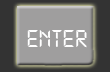
<style>
.page{position:relative;width:110px;height:72px;background:#9f9e9e}
.page>*{position:absolute;margin:0}
.t1{font:26px "DS-Digital";letter-spacing:-0.025em;color:#ffffff}
</style>
<div class="page">
<p class="t1" style="left:27px;top:30px;width:60px;height:18px">enter</p>
</div>
